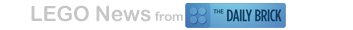
<style>
.page{position:relative;width:353px;height:30px;background:#ffffff}
.page>*{position:absolute;margin:0}
.t1{font:20.9px "ArialRoundedMTBold";color:#c6c6c6}
.t2{font:13px "ArialRoundedMTBold";color:#c6c6c6}
</style>
<div class="page">
<p class="t1" style="left:31px;top:5px;width:152px;height:17px">LEGO News <span class="t2">from</span></p>
</div>
